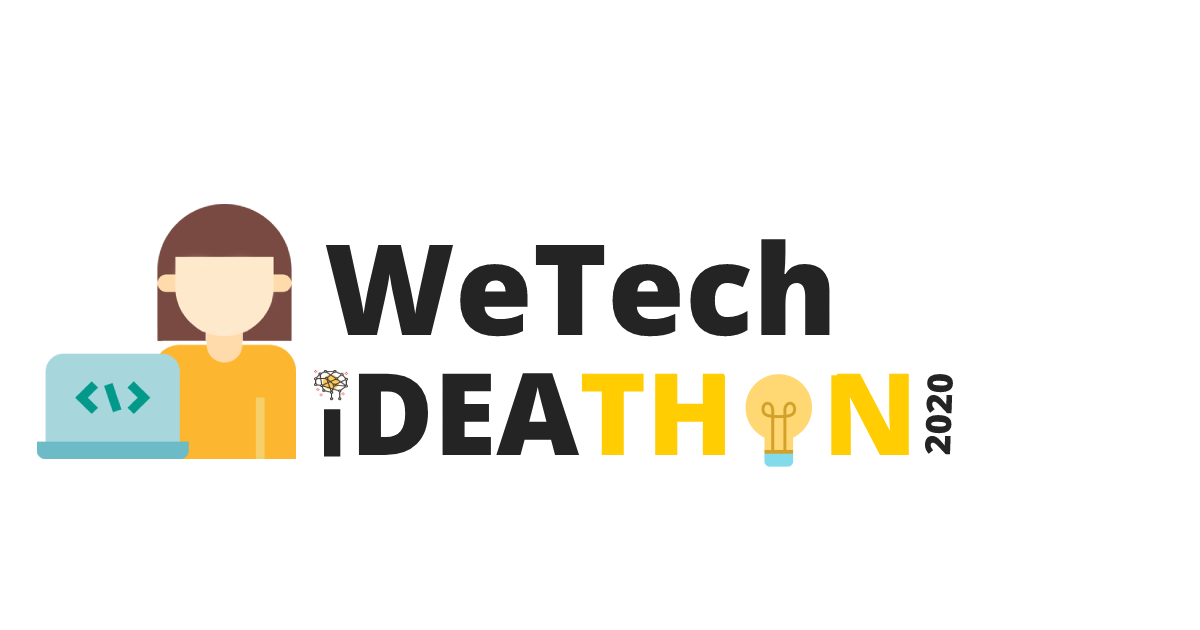
<style>
.page{position:relative;width:1200px;height:630px;background:#ffffff}
.page>*{position:absolute;margin:0}
.t1{font:126px "OpenSans-Extrabold";color:#242424}
.t2{font:114px "OpenSans-Extrabold";color:#ffcd01}
.t3{font:114px "OpenSans-Extrabold";color:#242424}
.t4{font:35px "OpenSans-Extrabold";color:#242424}
</style>
<div class="page">
<p class="t1" style="left:325px;top:239px;width:505px;height:98px">WeTech</p>
<p class="t2" style="left:358px;top:373px;width:551px;height:82px"><span class="t3">DEA</span>TH   N</p>
<p class="t4" style="left:925px;top:374px;width:28px;height:81px;rotate:-88deg">2020</p>
</div>
